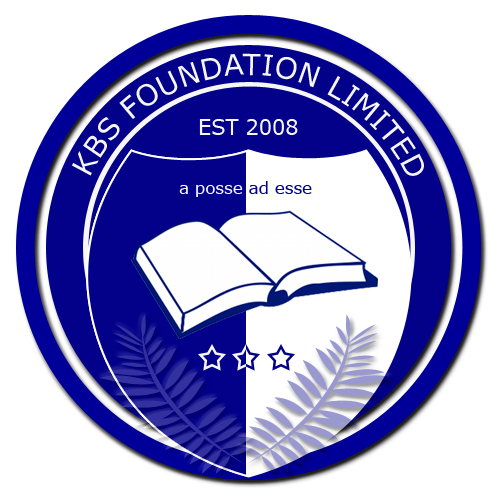
<style>
.page{position:relative;width:500px;height:500px;background:#ffffff}
.page>*{position:absolute;margin:0}
.t1{font:29.2px "Verdana";color:#f6f7f8}
.t2{font:20.8px "Verdana";color:#f6f7f8}
.t3{font:16.7px "Verdana";color:#f6f7f8}
.t4{font:16.7px "Verdana";color:#00009a}
</style>
<div class="page">
<p class="t1" style="left:71px;top:53px;width:353px;height:123px">KBS FOUNDATION LIMITED</p>
<p class="t2" style="left:199px;top:119px;width:99px;height:16px">EST 2008</p>
<p class="t3" style="left:179px;top:181px;width:133px;height:16px">a posse <span class="t4">ad esse</span></p>
</div>
